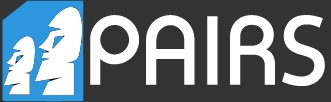
<style>
.page{position:relative;width:331px;height:102px;background:#333333}
.page>*{position:absolute;margin:0}
.t1{font:96px "PFUniversalMedium-Regular";color:#ffffff}
</style>
<div class="page">
<p class="t1" style="left:90px;top:15px;width:235px;height:71px">PAIRS</p>
</div>
